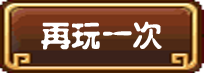
<style>
.page{position:relative;width:204px;height:73px}
.page>*{position:absolute;margin:0}
.t1{font:30px "FZSZJW--GB1-0";color:#ffffff;font-weight:bold}
</style>
<div class="page">
<p class="t1" style="left:41px;top:21px;width:121px;height:29px">再玩一次</p>
</div>
